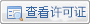
<style>
.page{position:relative;width:90px;height:24px}
.page>*{position:absolute;margin:0}
.t1{font:12px "MicrosoftYaHei";color:#3967a3}
</style>
<div class="page">
<p class="t1" style="left:50px;top:6px;width:36px;height:12px">许可证</p>
</div>
